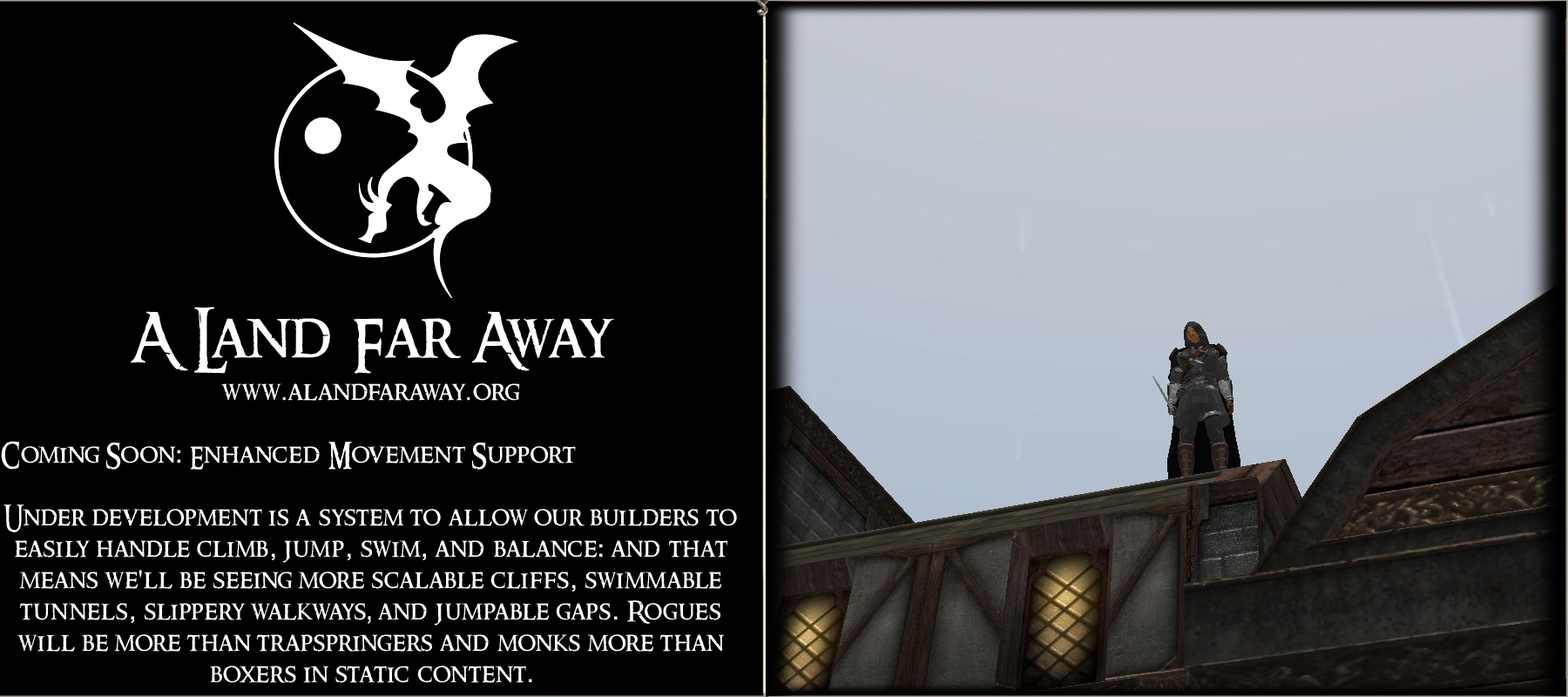
<style>
.page{position:relative;width:1568px;height:697px;background:#000000}
.page>*{position:absolute;margin:0}
.t1{font:26.1px "RingbearerMedium";letter-spacing:0.025em;color:#ffffff}
.t2{font:62.7px "RingbearerMedium";letter-spacing:0.025em;color:#ffffff}
.t3{font:26.1px "BookAntiqua";letter-spacing:0.025em;color:#ffffff}
.t4{font:26.1px "Rockwell";letter-spacing:0.025em;color:#ffffff}
.t5{font:26.1px "Rockwell-Condensed";letter-spacing:0.025em;color:#ffffff}
</style>
<div class="page">
<p class="t1" style="left:1px;top:307px;width:736px;height:376px;text-align:center"><span class="t2">A Land Far Away<br><br></span>www<span class="t3">.</span>alandfaraway<span class="t3">.</span>org<br><br>Coming Soon<span class="t4">:</span> Enhanced Movement Support<br><br>Under development is a system to allow our builders to easily handle climb<span class="t4">,</span> jump<span class="t4">,</span> swim<span class="t4">,</span> and balance<span class="t4">:</span> and that means we<span class="t4">'</span>ll be seeing more scalable cliffs<span class="t4">,</span> swimmable tunnels<span class="t4">,</span> slippery walkways<span class="t5">,</span> and jumpable gaps<span class="t4">.</span> Rogues will be more than trapspringers and monks more than boxers in static content<span class="t4">.</span></p>
</div>
